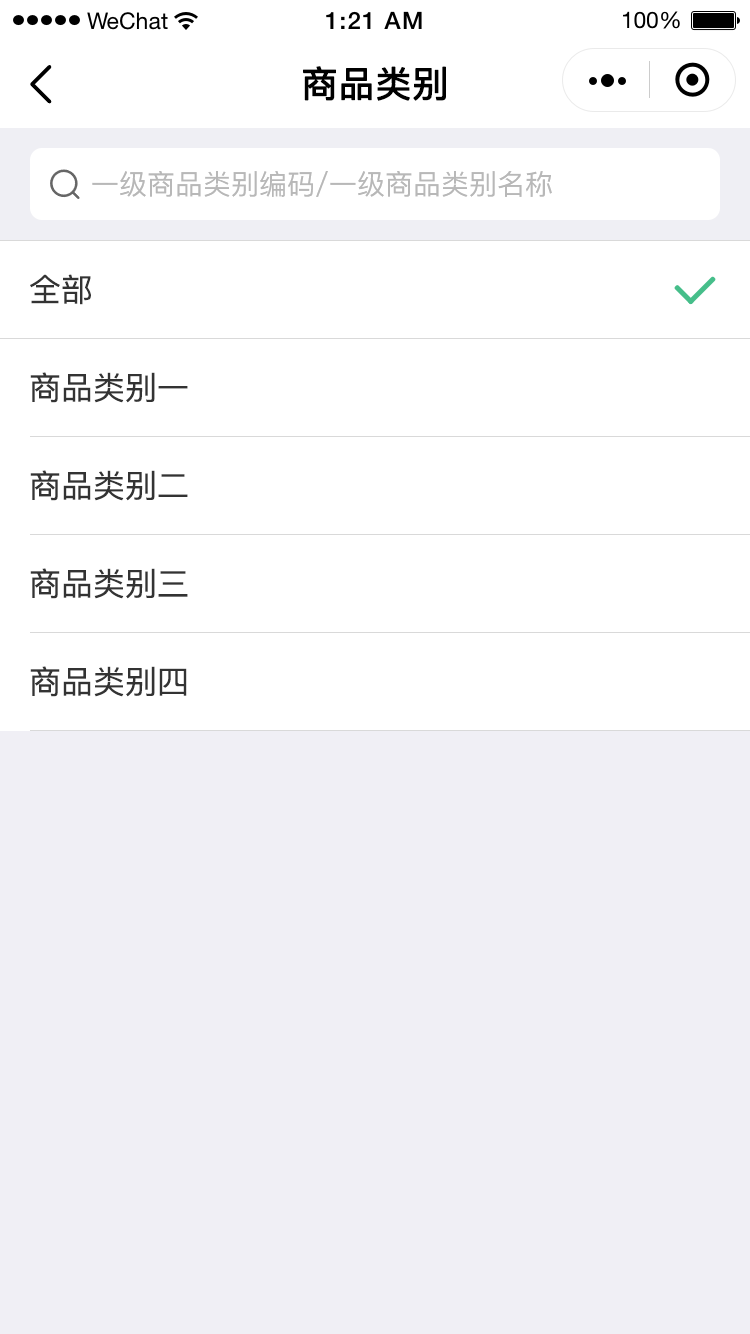
<style>
.page{position:relative;width:750px;height:1334px;background:#ffffff}
.page>*{position:absolute;margin:0}
.t1{font:36px "PingFang-SC-Medium";color:#000000;font-weight:bold}
.t2{font:28px "PingFang-SC-Medium";color:#b8b8b8}
.t3{font:32px "PingFang-SC-Medium";color:#333333}
</style>
<div class="page">
<p class="t1" style="left:303px;top:66px;width:143px;height:35px">商品类别</p>
<p class="t2" style="left:92px;top:171px;width:460px;height:26px">一级商品类别编码/一级商品类别名称</p>
<p class="t3" style="left:30px;top:274px;width:61px;height:31px">全部</p>
<p class="t3" style="left:30px;top:372px;width:158px;height:31px">商品类别一</p>
<p class="t3" style="left:30px;top:470px;width:158px;height:31px">商品类别二</p>
<p class="t3" style="left:30px;top:568px;width:158px;height:31px">商品类别三</p>
<p class="t3" style="left:30px;top:666px;width:157px;height:31px">商品类别四</p>
</div>
